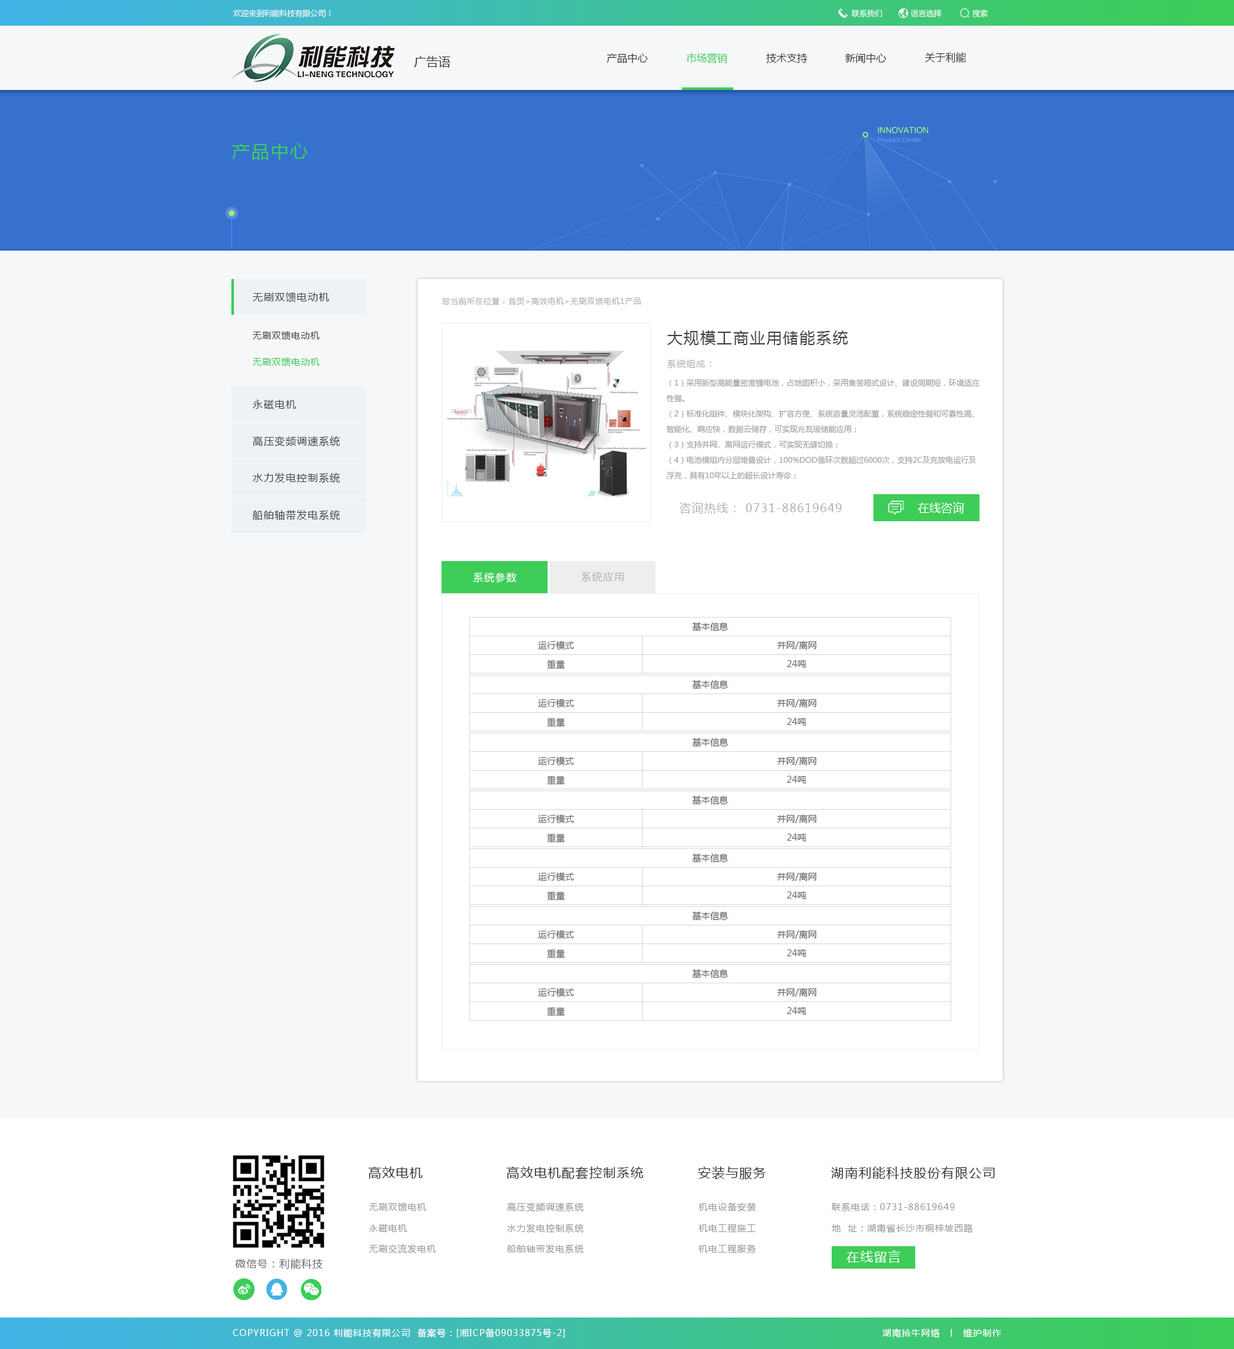
<style>
.page{position:relative;width:1234px;height:1349px;background:#f6f7f9}
.page>*{position:absolute;margin:0}
.t1{font:7.7px "MicrosoftYaHei";color:#f6f7f9}
.t2{font:10.3px "MicrosoftYaHei";color:#343434}
.t3{font:10.3px "MicrosoftYaHei";color:#3dcd58}
.t4{font:12.2px "MicrosoftYaHei";color:#343434}
.t5{font:18px "MicrosoftYaHei";letter-spacing:0.072em;color:#3dcd58}
.t6{font:10.3px "MicrosoftYaHei";letter-spacing:0.072em;color:#444444}
.t7{font:7.7px "MicrosoftYaHei";letter-spacing:0.072em;color:#b3b3b3}
.t8{font:9px "MicrosoftYaHei";letter-spacing:0.072em;color:#444444}
.t9{font:15.4px "MicrosoftYaHei";letter-spacing:0.072em;color:#444444}
.t10{font:9px "MicrosoftYaHei";letter-spacing:0.072em;color:#3dcd58}
.t11{font:9px "MicrosoftYaHei";letter-spacing:0.072em;color:#b3b3b3}
.t12{font:7.7px/15.4px "MicrosoftYaHei";color:#a2a2a2}
.t13{font:11.6px "MicrosoftYaHei";letter-spacing:0.072em;color:#b3b3b3}
.t14{font:11.6px "MicrosoftYaHei";color:#ffffff}
.t15{font:10.3px "MicrosoftYaHei";letter-spacing:0.072em;color:#ffffff}
.t16{font:10.3px "MicrosoftYaHei";letter-spacing:0.072em;color:#b3b3b3}
.t17{font:9px "MicrosoftYaHei";color:#656565}
.t18{font:12.9px "MicrosoftYaHei";letter-spacing:0.072em;color:#323232}
.t19{font:9px "MicrosoftYaHei";letter-spacing:0.072em;color:#9a9a9a}
.t20{font:12.9px "MicrosoftYaHei";letter-spacing:0.072em;color:#ffffff}
.t21{font:10.3px "MicrosoftYaHei";letter-spacing:0.072em;color:#676767}
.t22{font:9px "MicrosoftYaHei";letter-spacing:0.072em;color:#ffffff}
</style>
<div class="page">
<p class="t1" style="left:233px;top:9px;width:97px;height:8px">欢迎来到利能科技有限公司！</p>
<p class="t1" style="left:851px;top:10px;width:32px;height:7px">联系我们</p>
<p class="t1" style="left:911px;top:9px;width:31px;height:8px">语言选择</p>
<p class="t1" style="left:973px;top:9px;width:15px;height:8px">搜索</p>
<p class="t2" style="left:607px;top:53px;width:41px;height:10px">产品中心</p>
<p class="t3" style="left:687px;top:53px;width:41px;height:11px">市场营销</p>
<p class="t2" style="left:766px;top:53px;width:41px;height:10px">技术支持</p>
<p class="t2" style="left:845px;top:53px;width:42px;height:10px">新闻中心</p>
<p class="t2" style="left:925px;top:52px;width:41px;height:10px">关于利能</p>
<p class="t4" style="left:414px;top:56px;width:37px;height:12px">广告语</p>
<p class="t5" style="left:232px;top:143px;width:76px;height:17px">产品中心</p>
<p class="t6" style="left:253px;top:292px;width:76px;height:10px">无刷双馈电动机</p>
<p class="t7" style="left:442px;top:297px;width:199px;height:8px">您当前所在位置：首页&gt;高效电机&gt;无刷双馈电机1产品</p>
<p class="t8" style="left:253px;top:331px;width:67px;height:9px">无刷双馈电动机</p>
<p class="t9" style="left:667px;top:330px;width:182px;height:16px">大规模工商业用储能系统</p>
<p class="t10" style="left:253px;top:357px;width:67px;height:9px">无刷双馈电动机</p>
<p class="t11" style="left:667px;top:359px;width:44px;height:9px">系统组成：</p>
<p class="t12" style="left:667px;top:379px;width:313px;height:101px">（1）采用新型高能量密度锂电池，占地面积小，采用集装箱式设计、建设周期短，环境适应性强。<br>（2）标准化组件、模块化架构、扩容方便、系统容量灵活配置，系统稳定性强和可靠性高、智能化、响应快，数据云储存，可实现兆瓦级储能应用；<br>（3）支持并网、离网运行模式，可实现无缝切换；<br>（4）电池模组内分层堆叠设计，100%DOD循环次数超过6000次，支持2C及充放电运行及浮充，具有10年以上的超长设计寿命；<br>（5）减少弃光、弃风，提高经济性。</p>
<p class="t6" style="left:253px;top:399px;width:43px;height:11px">永磁电机</p>
<p class="t6" style="left:253px;top:436px;width:87px;height:11px">高压变频调速系统</p>
<p class="t6" style="left:253px;top:473px;width:87px;height:10px">水力发电控制系统</p>
<p class="t6" style="left:253px;top:510px;width:87px;height:11px">船舶轴带发电系统</p>
<p class="t13" style="left:680px;top:502px;width:162px;height:12px">咨询热线： 0731-88619649</p>
<p class="t14" style="left:918px;top:502px;width:46px;height:12px">在线咨询</p>
<p class="t15" style="left:473px;top:572px;width:44px;height:11px">系统参数</p>
<p class="t16" style="left:581px;top:572px;width:43px;height:10px">系统应用</p>
<p class="t17" style="left:692px;top:622px;width:36px;height:9px">基本信息</p>
<p class="t17" style="left:538px;top:641px;width:36px;height:9px">运行模式</p>
<p class="t17" style="left:777px;top:641px;width:39px;height:9px">并网/离网</p>
<p class="t17" style="left:547px;top:660px;width:18px;height:9px">重量</p>
<p class="t17" style="left:787px;top:660px;width:20px;height:8px">24吨</p>
<p class="t17" style="left:692px;top:680px;width:36px;height:9px">基本信息</p>
<p class="t17" style="left:538px;top:699px;width:36px;height:9px">运行模式</p>
<p class="t17" style="left:777px;top:699px;width:39px;height:9px">并网/离网</p>
<p class="t17" style="left:547px;top:718px;width:18px;height:9px">重量</p>
<p class="t17" style="left:787px;top:718px;width:20px;height:8px">24吨</p>
<p class="t17" style="left:692px;top:738px;width:36px;height:9px">基本信息</p>
<p class="t17" style="left:538px;top:757px;width:36px;height:9px">运行模式</p>
<p class="t17" style="left:777px;top:757px;width:39px;height:9px">并网/离网</p>
<p class="t17" style="left:547px;top:776px;width:18px;height:9px">重量</p>
<p class="t17" style="left:787px;top:776px;width:20px;height:8px">24吨</p>
<p class="t17" style="left:692px;top:796px;width:36px;height:9px">基本信息</p>
<p class="t17" style="left:538px;top:815px;width:36px;height:9px">运行模式</p>
<p class="t17" style="left:777px;top:815px;width:39px;height:9px">并网/离网</p>
<p class="t17" style="left:547px;top:834px;width:18px;height:9px">重量</p>
<p class="t17" style="left:787px;top:834px;width:20px;height:8px">24吨</p>
<p class="t17" style="left:692px;top:854px;width:36px;height:9px">基本信息</p>
<p class="t17" style="left:538px;top:872px;width:36px;height:9px">运行模式</p>
<p class="t17" style="left:777px;top:872px;width:39px;height:9px">并网/离网</p>
<p class="t17" style="left:547px;top:892px;width:18px;height:9px">重量</p>
<p class="t17" style="left:787px;top:892px;width:20px;height:7px">24吨</p>
<p class="t17" style="left:692px;top:912px;width:36px;height:9px">基本信息</p>
<p class="t17" style="left:538px;top:930px;width:36px;height:9px">运行模式</p>
<p class="t17" style="left:777px;top:930px;width:39px;height:9px">并网/离网</p>
<p class="t17" style="left:547px;top:950px;width:18px;height:9px">重量</p>
<p class="t17" style="left:787px;top:950px;width:20px;height:7px">24吨</p>
<p class="t17" style="left:692px;top:969px;width:36px;height:9px">基本信息</p>
<p class="t17" style="left:538px;top:988px;width:36px;height:9px">运行模式</p>
<p class="t17" style="left:777px;top:988px;width:39px;height:9px">并网/离网</p>
<p class="t17" style="left:547px;top:1007px;width:18px;height:9px">重量</p>
<p class="t17" style="left:787px;top:1007px;width:20px;height:8px">24吨</p>
<p class="t18" style="left:368px;top:1167px;width:55px;height:12px">高效电机</p>
<p class="t18" style="left:507px;top:1167px;width:137px;height:13px">高效电机配套控制系统</p>
<p class="t18" style="left:698px;top:1167px;width:68px;height:13px">安装与服务</p>
<p class="t18" style="left:831px;top:1167px;width:164px;height:13px">湖南利能科技股份有限公司</p>
<p class="t19" style="left:369px;top:1203px;width:57px;height:9px">无刷双馈电机</p>
<p class="t19" style="left:507px;top:1203px;width:77px;height:9px">高压变频调速系统</p>
<p class="t19" style="left:699px;top:1203px;width:57px;height:9px">机电设备安装</p>
<p class="t19" style="left:832px;top:1203px;width:123px;height:9px">联系电话：0731-88619649</p>
<p class="t19" style="left:369px;top:1224px;width:38px;height:9px">永磁电机</p>
<p class="t19" style="left:507px;top:1224px;width:77px;height:9px">水力发电控制系统</p>
<p class="t19" style="left:699px;top:1224px;width:57px;height:10px">机电工程施工</p>
<p class="t19" style="left:832px;top:1224px;width:141px;height:10px">地  址：湖南省长沙市桐梓坡西路</p>
<p class="t19" style="left:369px;top:1245px;width:67px;height:9px">无刷交流发电机</p>
<p class="t19" style="left:507px;top:1245px;width:77px;height:9px">船舶轴带发电系统</p>
<p class="t19" style="left:699px;top:1245px;width:57px;height:9px">机电工程服务</p>
<p class="t20" style="left:847px;top:1250px;width:54px;height:13px">在线留言</p>
<p class="t21" style="left:235px;top:1259px;width:88px;height:11px">微信号：利能科技</p>
<p class="t22" style="left:233px;top:1329px;width:332px;height:9px">COPYRIGHT @ 2016 利能科技有限公司  备案号：[湘ICP备09033875号-2]</p>
<p class="t22" style="left:883px;top:1329px;width:119px;height:9px">湖南拾牛网络  丨  维护制作</p>
</div>
